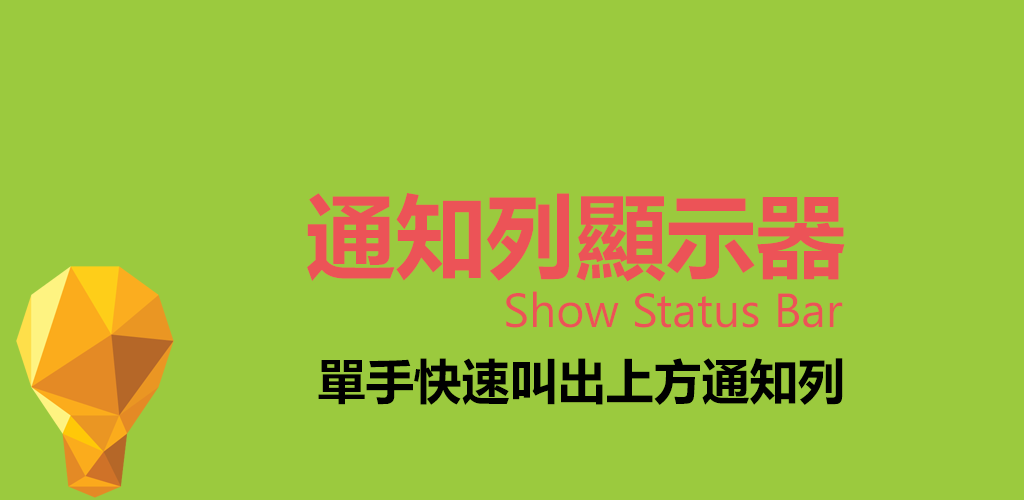
<style>
.page{position:relative;width:1024px;height:500px;background:#9bca3e}
.page>*{position:absolute;margin:0}
.t1{font:90px "MicrosoftYaHei-Bold";color:#ec5357}
.t2{font:48px "SegoeUI";color:#ec5357}
.t3{font:48px "MicrosoftYaHei-Bold";color:#000000}
</style>
<div class="page">
<p class="t1" style="left:307px;top:193px;width:538px;height:89px">通知列顯示器</p>
<p class="t2" style="left:506px;top:291px;width:337px;height:37px">Show Status Bar</p>
<p class="t3" style="left:318px;top:358px;width:525px;height:47px">單手快速叫出上方通知列</p>
</div>
